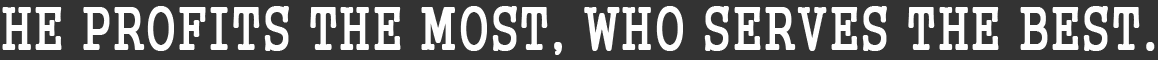
<style>
.page{position:relative;width:1158px;height:60px;background:#333333}
.page>*{position:absolute;margin:0}
.t1{font:58.3px "Gungsuh";color:#fefefe;text-transform:uppercase;font-weight:bold;scale:0.78 1}
</style>
<div class="page">
<p class="t1" style="left:2px;top:6px;width:1153px;height:49px">He profits THE most, who serves THE best.</p>
</div>
